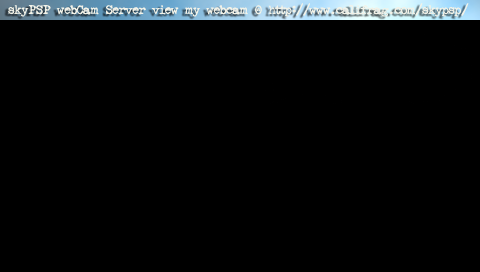
<style>
.page{position:relative;width:480px;height:272px;background:#000000}
.page>*{position:absolute;margin:0}
.t1{font:14px "Ghostwriter";color:#dadada}
</style>
<div class="page">
<p class="t1" style="left:8px;top:3px;width:461px;height:14px">skyPSP webCam Server view my webcam @ http://www.califrag.com/skypsp/</p>
</div>
